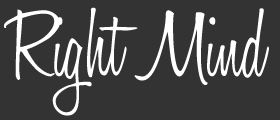
<style>
.page{position:relative;width:280px;height:120px;background:#333333}
.page>*{position:absolute;margin:0}
.t1{font:100px "HoneyScript-Light";color:#ffffff;scale:0.88 1}
</style>
<div class="page">
<p class="t1" style="left:4px;top:7px;width:265px;height:109px">Right Mind</p>
</div>
